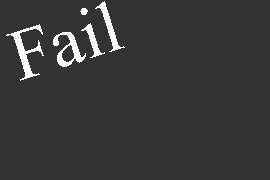
<style>
.page{position:relative;width:270px;height:180px;background:#333333}
.page>*{position:absolute;margin:0}
.t1{font:72px "TimesNewRomanPSMT";color:#ffffff}
</style>
<div class="page">
<p class="t1" style="left:6px;top:1px;width:119px;height:80px;rotate:-17deg">Fail</p>
</div>
